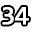
<style>
.page{position:relative;width:32px;height:32px;background:#ffffff}
.page>*{position:absolute;margin:0}
.t1{font:26px "Consolas";letter-spacing:-0.04em;color:#ffffff;font-weight:bold}
</style>
<div class="page">
<p class="t1" style="left:2px;top:7px;width:27px;height:18px">34</p>
</div>
